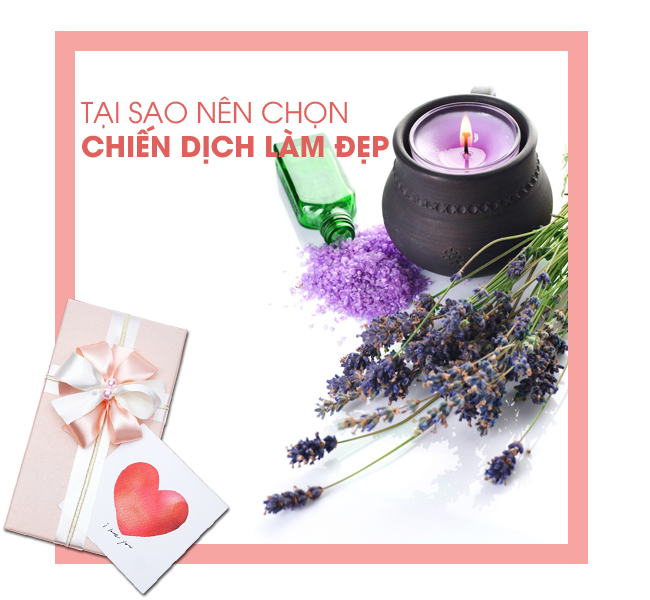
<style>
.page{position:relative;width:650px;height:600px;background:#ffffff}
.page>*{position:absolute;margin:0}
.t1{font:28.4px "UTMAvoBold";color:#df605d}
.t2{font:28.4px "UTM-Avo";color:#df605d}
</style>
<div class="page">
<p class="t1" style="left:81px;top:96px;width:308px;height:68px"><span class="t2">TẠI SAO NÊN CHỌN<br></span>CHIẾN DỊCH LÀM ĐẸP</p>
</div>
